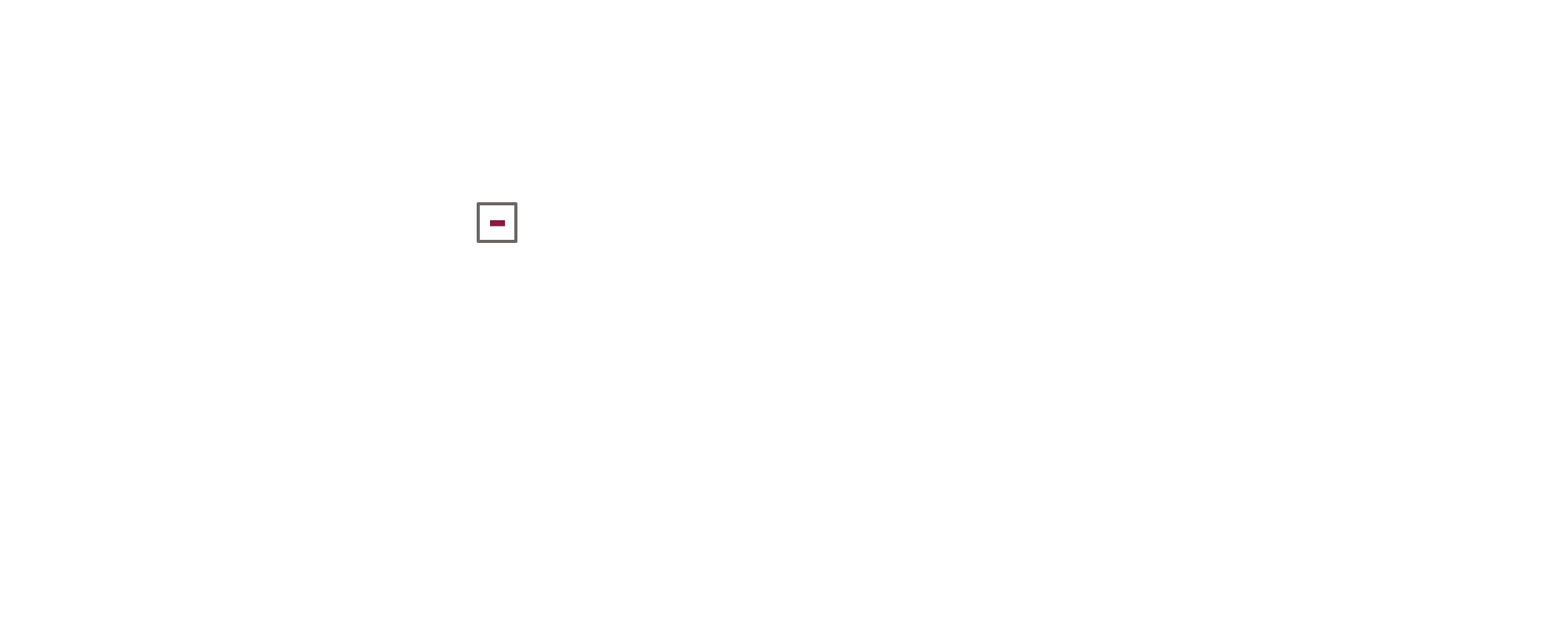
<style>
.page{position:relative;width:1568px;height:627px;background:#ffffff}
.page>*{position:absolute;margin:0}
.t1{font:56.4px "MicrosoftPhagsPa-Bold";color:#8e173d}
</style>
<div class="page">
<p class="t1" style="left:490px;top:220px;width:16px;height:7px">-</p>
</div>
